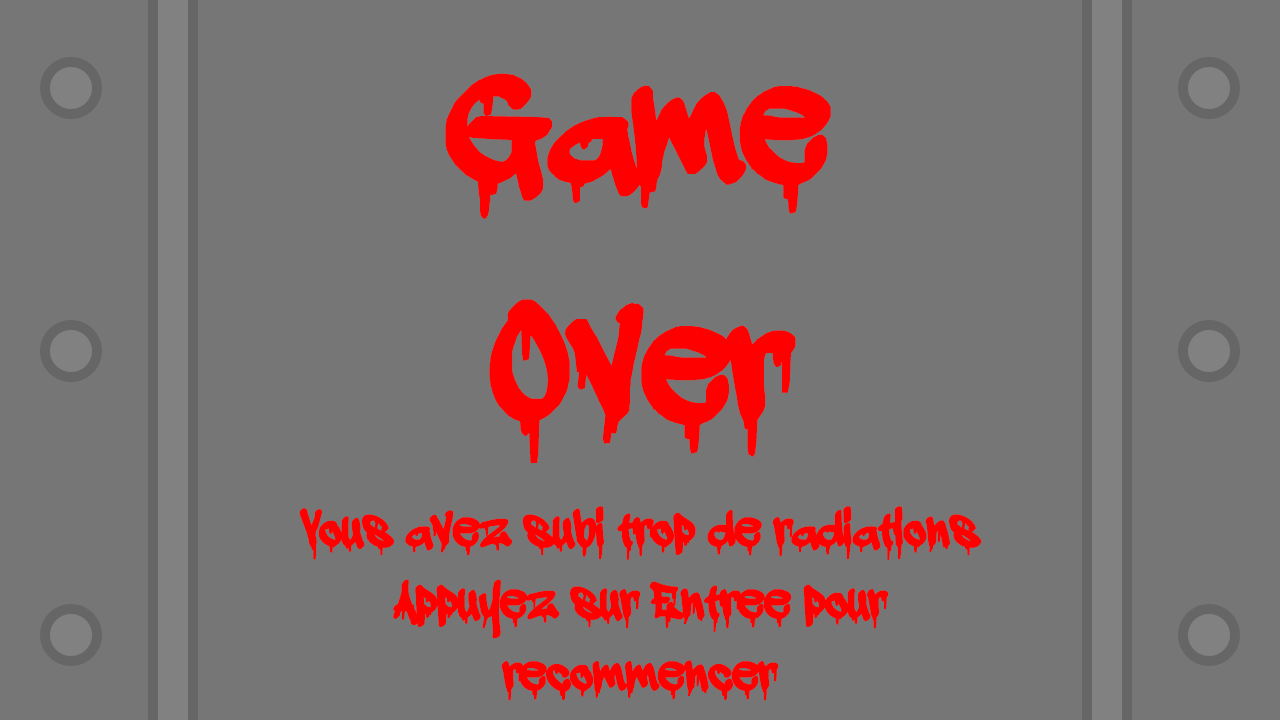
<style>
.page{position:relative;width:1280px;height:720px;background:#767676}
.page>*{position:absolute;margin:0}
.t1{font:200px "adrippingmarker";color:#ff0000;font-weight:bold}
.t2{font:60px "adrippingmarker";color:#ff0000;font-weight:bold}
</style>
<div class="page">
<p class="t1" style="left:445px;top:73px;width:386px;height:390px;text-align:center">Game<br>Over</p>
<p class="t2" style="left:299px;top:506px;width:683px;height:195px;text-align:center">Vous avez subi trop de radiations<br>Appuyez sur Entree pour recommencer</p>
</div>
